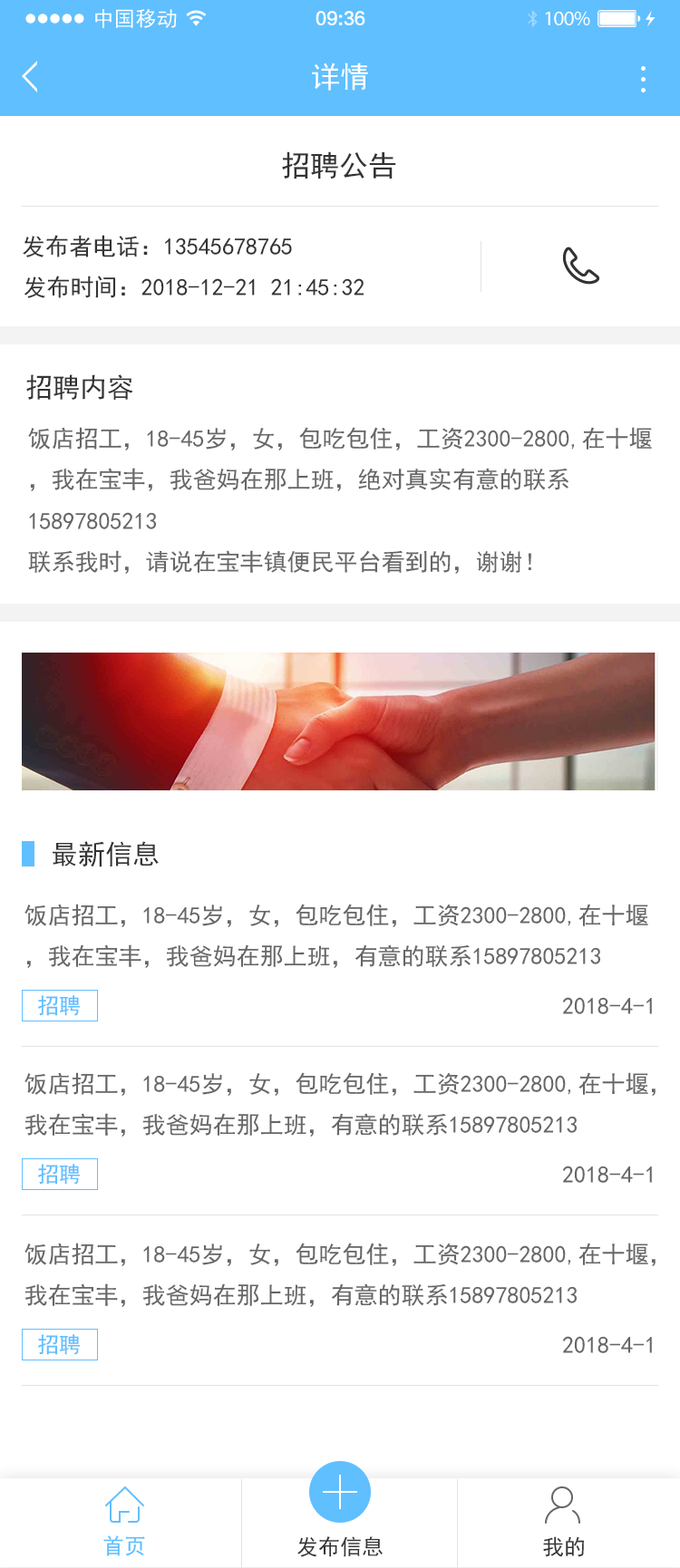
<style>
.page{position:relative;width:680px;height:1568px;background:#ffffff}
.page>*{position:absolute;margin:0}
.t1{font:20.7px "SimHei";letter-spacing:0.02em;color:#ffffff}
.t2{font:17.2px "FZLTCHJW--GB1-0";letter-spacing:-0.02em;color:#ffffff}
.t3{font:20.7px "MyriadPro-Regular";letter-spacing:-0.02em;color:#ffffff}
.t4{font:29px "SimHei";color:#ffffff}
.t5{font:29px "SimHei";color:#333333}
.t6{font:23.6px "SimHei";color:#333333}
.t7{font:27.2px "SimHei";color:#333333}
.t8{font:23.6px "SimHei";color:#666666}
.t9{font:21.8px "SimHei";color:#60bfff}
.t10{font:21.8px "SimHei";color:#353535}
</style>
<div class="page">
<p class="t1" style="left:95px;top:9px;width:82px;height:19px">中国移动</p>
<p class="t2" style="left:315px;top:11px;width:50px;height:14px">09:36</p>
<p class="t3" style="left:545px;top:11px;width:45px;height:14px">100%</p>
<p class="t4" style="left:312px;top:63px;width:56px;height:28px">详情</p>
<p class="t5" style="left:282px;top:151px;width:114px;height:28px">招聘公告</p>
<p class="t6" style="left:23px;top:235px;width:269px;height:22px">发布者电话：13545678765</p>
<p class="t6" style="left:24px;top:276px;width:340px;height:22px">发布时间：2018-12-21 21:45:32</p>
<p class="t7" style="left:26px;top:374px;width:107px;height:26px">招聘内容</p>
<p class="t8" style="left:28px;top:427px;width:624px;height:147px">饭店招工，18-45岁，女，包吃包住，工资2300-2800,在十堰，我在宝丰，我爸妈在那上班，绝对真实有意的联系15897805213<br>联系我时，请说在宝丰镇便民平台看到的，谢谢！</p>
<p class="t7" style="left:53px;top:841px;width:106px;height:26px">最新信息</p>
<p class="t8" style="left:24px;top:904px;width:624px;height:64px">饭店招工，18-45岁，女，包吃包住，工资2300-2800,在十堰，我在宝丰，我爸妈在那上班，有意的联系15897805213</p>
<p class="t9" style="left:38px;top:995px;width:43px;height:21px">招聘</p>
<p class="t8" style="left:562px;top:997px;width:90px;height:17px">2018-4-1</p>
<p class="t8" style="left:24px;top:1072px;width:631px;height:65px">饭店招工，18-45岁，女，包吃包住，工资2300-2800,在十堰，我在宝丰，我爸妈在那上班，有意的联系15897805213</p>
<p class="t9" style="left:38px;top:1164px;width:43px;height:21px">招聘</p>
<p class="t8" style="left:562px;top:1166px;width:90px;height:17px">2018-4-1</p>
<p class="t8" style="left:24px;top:1243px;width:631px;height:64px">饭店招工，18-45岁，女，包吃包住，工资2300-2800,在十堰，我在宝丰，我爸妈在那上班，有意的联系15897805213</p>
<p class="t9" style="left:38px;top:1334px;width:43px;height:21px">招聘</p>
<p class="t8" style="left:562px;top:1336px;width:90px;height:17px">2018-4-1</p>
<p class="t9" style="left:103px;top:1535px;width:42px;height:21px">首页</p>
<p class="t10" style="left:297px;top:1536px;width:85px;height:21px">发布信息</p>
<p class="t10" style="left:543px;top:1536px;width:42px;height:21px">我的</p>
</div>
